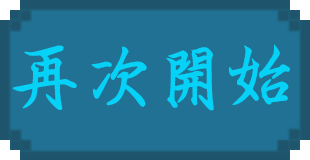
<style>
.page{position:relative;width:310px;height:160px;background:#207193}
.page>*{position:absolute;margin:0}
.t1{font:72.3px "HanWangWCL07";color:#06d2f7}
</style>
<div class="page">
<p class="t1" style="left:12px;top:44px;width:278px;height:67px">再次開始</p>
</div>
